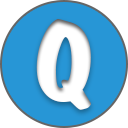
<style>
.page{position:relative;width:128px;height:128px;background:#2796d6}
.page>*{position:absolute;margin:0}
.t1{font:115px "DomBoldBTRusbyme";color:#ffffff}
</style>
<div class="page">
<p class="t1" style="left:36px;top:19px;width:56px;height:91px">Q</p>
</div>
